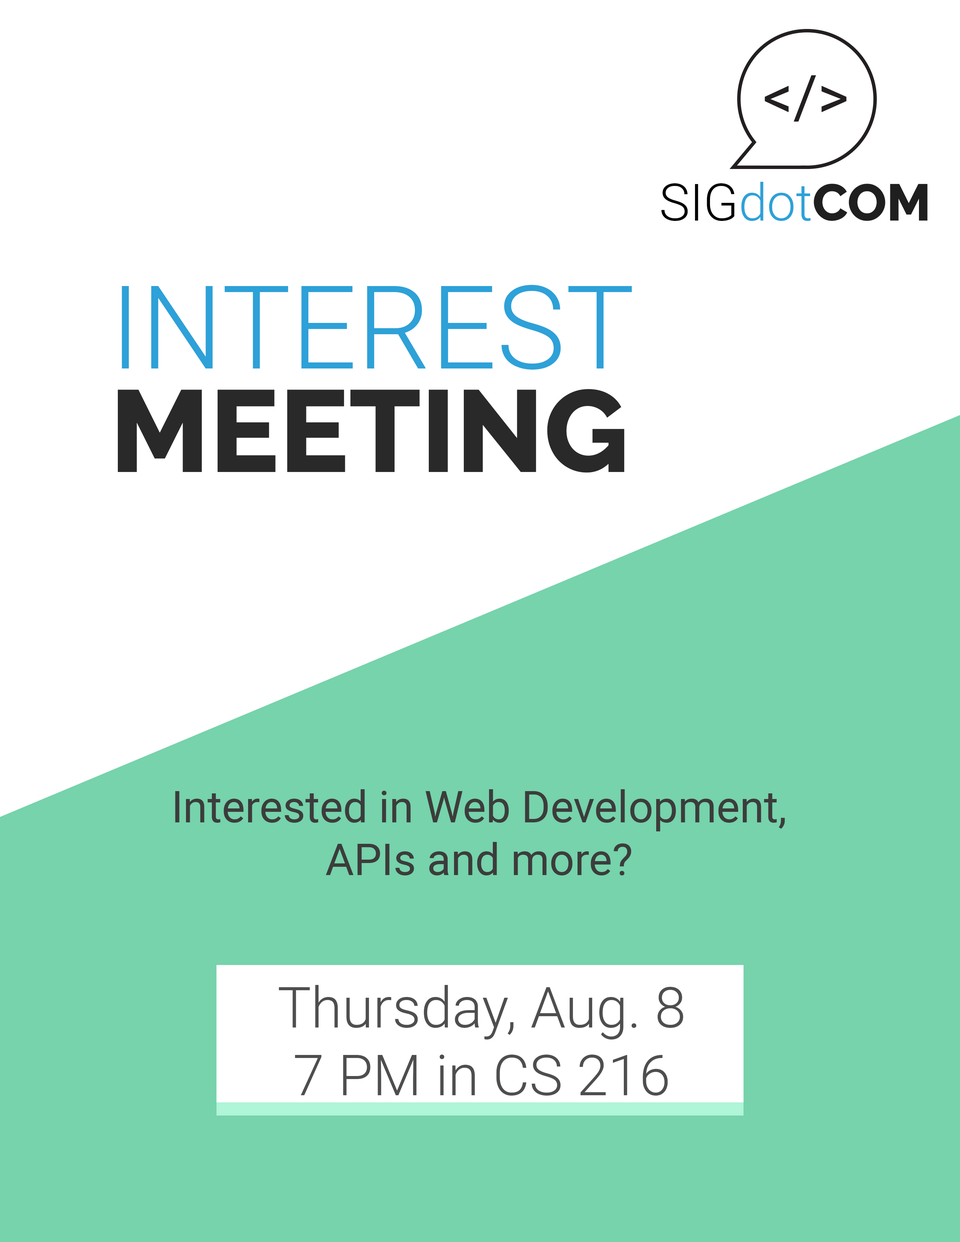
<style>
.page{position:relative;width:960px;height:1242px;background:#ffffff}
.page>*{position:absolute;margin:0}
.t1{font:51.4px "Roboto-Light";color:#000000}
.t2{font:51.4px "Roboto-Light";color:#2da1d8}
.t3{font:51.4px "Raleway-ExtraBold";color:#1f1f1f}
.t4{font:116.1px/103.5px "Roboto-Light";color:#2da1d8}
.t5{font:116.1px/103.5px "Raleway-ExtraBold";color:#292929}
.t6{font:43.9px "Roboto-Regular";color:#3c3c3c}
.t7{font:56.5px "Roboto-Light";color:#4e4e4e}
</style>
<div class="page">
<p class="t1" style="left:661px;top:182px;width:267px;height:39px">SIG<span class="t2">dot</span><span class="t3">COM</span></p>
<p class="t4" style="left:117px;top:285px;width:515px;height:188px">INTEREST<br><span class="t5">MEETING</span></p>
<p class="t6" style="left:175px;top:789px;width:610px;height:87px;text-align:center">Interested in Web Development,<br>APIs and more?</p>
<p class="t7" style="left:279px;top:985px;width:404px;height:111px;text-align:center">Thursday, Aug. 8<br>7 PM in CS 216</p>
</div>
